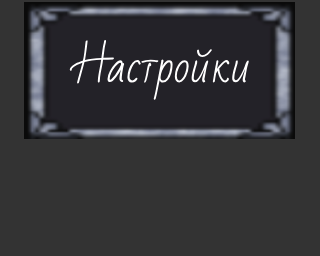
<style>
.page{position:relative;width:320px;height:256px;background:#333333}
.page>*{position:absolute;margin:0}
.t1{font:43px "BadScript-Regular";color:#ffffff}
</style>
<div class="page">
<p class="t1" style="left:69px;top:39px;width:180px;height:61px">Настройки</p>
</div>
